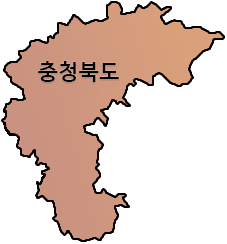
<style>
.page{position:relative;width:227px;height:244px;background:#ffffff}
.page>*{position:absolute;margin:0}
.t1{font:22px "HancomGothicBold";color:#000000}
</style>
<div class="page">
<p class="t1" style="left:38px;top:61px;width:81px;height:21px">충청북도</p>
</div>
